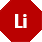
<style>
.page{position:relative;width:42px;height:42px;background:#ba0101}
.page>*{position:absolute;margin:0}
.t1{font:20px "AbadiMT-CondensedExtraBold";color:#ffffff}
</style>
<div class="page">
<p class="t1" style="left:15px;top:14px;width:12px;height:14px">Li</p>
</div>
